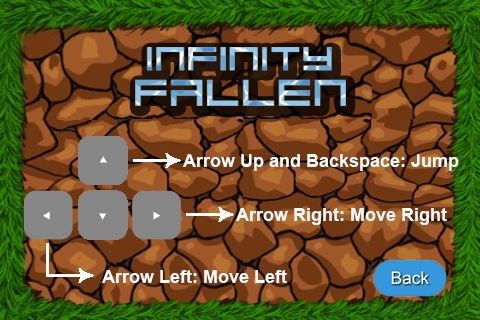
<style>
.page{position:relative;width:480px;height:320px}
.page>*{position:absolute;margin:0}
.t1{font:18px "Arial-BoldMT";color:#ffffff}
</style>
<div class="page">
<p class="t1" style="left:183px;top:154px;width:276px;height:17px">Arrow Up and Backspace: Jump</p>
<p class="t1" style="left:236px;top:208px;width:211px;height:17px">Arrow Right: Move Right</p>
<p class="t1" style="left:102px;top:270px;width:185px;height:13px">Arrow Left: Move Left</p>
</div>
